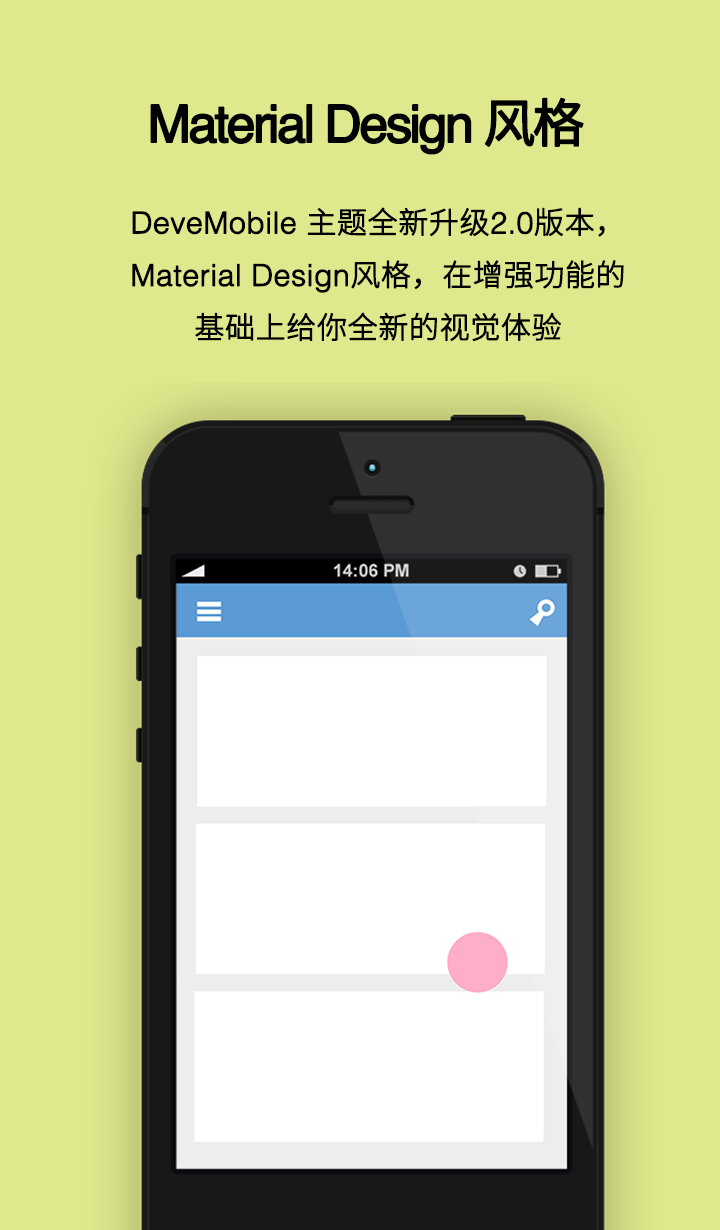
<style>
.page{position:relative;width:720px;height:1230px;background:#dfe88c}
.page>*{position:absolute;margin:0}
.t1{font:52px "Helvetica";letter-spacing:-0.075em;color:#000000;font-weight:bold}
.t2{font:52px "SourceHanSansCN-Regular";letter-spacing:-0.075em;color:#000000;font-weight:bold}
.t3{font:30px "SourceHanSansCN-Light";letter-spacing:-0.005em;color:#000000;font-weight:bold}
.t4{font:30px "Helvetica-Light";letter-spacing:-0.005em;color:#000000;font-weight:bold}
</style>
<div class="page">
<p class="t1" style="left:150px;top:97px;width:434px;height:58px">Material Design <span class="t2">风格</span></p>
<p class="t3" style="left:132px;top:207px;width:492px;height:135px;text-align:center"><span class="t4">DeveMobile </span>主题全新升级<span class="t4">2.0</span>版本，<span class="t4">Material Design</span>风格，在增强功能的基础上给你全新的视觉体验</p>
</div>
